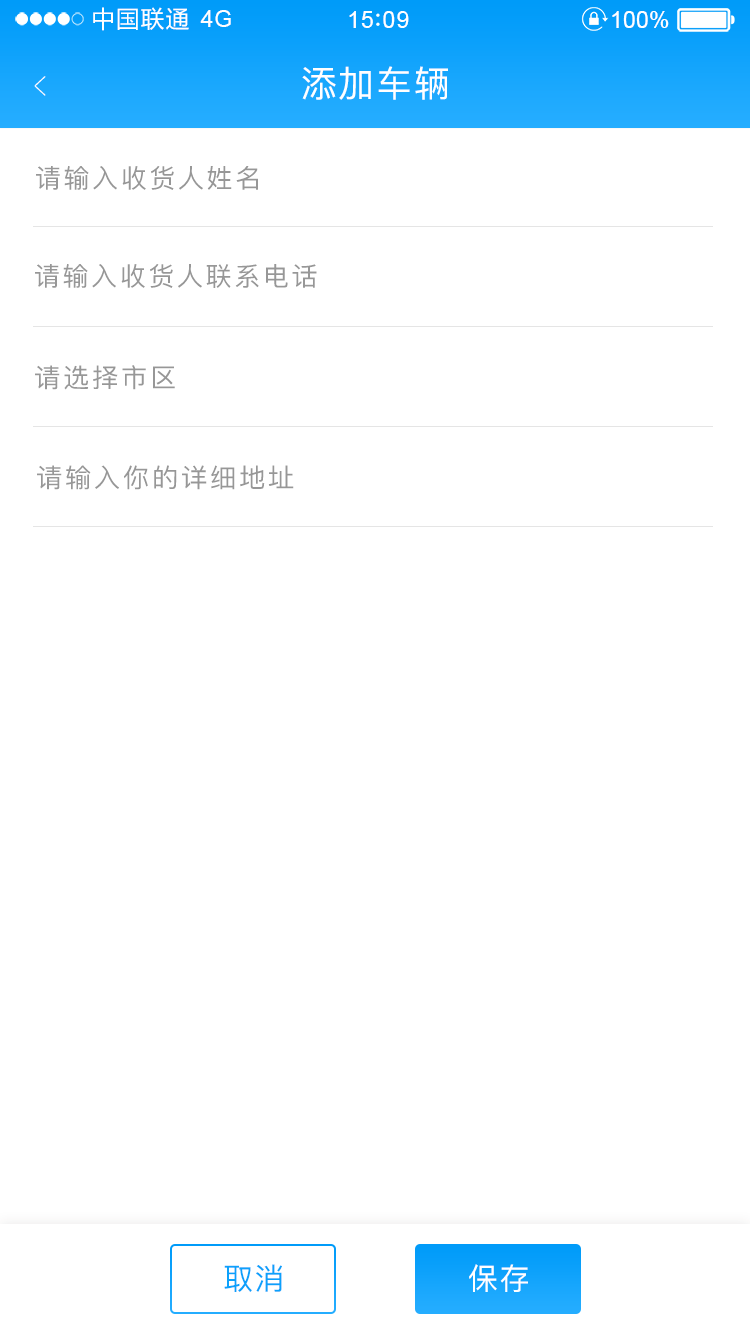
<style>
.page{position:relative;width:750px;height:1334px;background:#ffffff}
.page>*{position:absolute;margin:0}
.t1{font:23.4px "MicrosoftYaHei";letter-spacing:0.06em;color:#ffffff}
.t2{font:23.4px "ArialMT";letter-spacing:0.02em;color:#ffffff}
.t3{font:23.4px "ArialMT";letter-spacing:0.04em;color:#ffffff}
.t4{font:23.4px "ArialMT";color:#ffffff}
.t5{font:39px "PingFang-SC-ExtraLight";letter-spacing:0.1em;color:#ffffff;scale:0.51 1}
.t6{font:36px "PingFang-SC-Medium";letter-spacing:0.05em;color:#ffffff}
.t7{font:26px "PingFang-SC-Medium";letter-spacing:0.1em;color:#979797}
.t8{font:30px "PingFang-SC-Medium";letter-spacing:0.05em;color:#0ca1fb}
.t9{font:30px "PingFang-SC-Medium";letter-spacing:0.05em;color:#ffffff}
</style>
<div class="page">
<p class="t1" style="left:93px;top:7px;width:96px;height:24px">中国联通</p>
<p class="t2" style="left:200px;top:10px;width:31px;height:17px">4G</p>
<p class="t3" style="left:349px;top:11px;width:60px;height:17px">15 09</p>
<p class="t4" style="left:612px;top:11px;width:57px;height:17px">100%</p>
<p class="t5" style="left:34px;top:76px;width:12px;height:20px;rotate:180deg">&gt;</p>
<p class="t6" style="left:302px;top:66px;width:146px;height:34px">添加车辆</p>
<p class="t7" style="left:36px;top:166px;width:222px;height:24px">请输入收货人姓名</p>
<p class="t7" style="left:35px;top:264px;width:282px;height:24px">请输入收货人联系电话</p>
<p class="t7" style="left:35px;top:365px;width:140px;height:25px">请选择市区</p>
<p class="t7" style="left:37px;top:465px;width:257px;height:25px">请输入你的详细地址</p>
<p class="t8" style="left:224px;top:1264px;width:58px;height:28px">取消</p>
<p class="t9" style="left:469px;top:1264px;width:59px;height:28px">保存</p>
</div>
